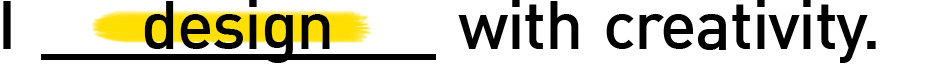
<style>
.page{position:relative;width:936px;height:64px;background:#ffffff}
.page>*{position:absolute;margin:0}
.t1{font:68.4px "DIN-Medium";color:#000000}
.t2{font:68.4px "DIN-Medium";letter-spacing:-0.025em;color:#000000}
</style>
<div class="page">
<p class="t1" style="left:3px;top:1px;width:8px;height:48px">I</p>
<p class="t2" style="left:144px;top:0px;width:186px;height:63px">design</p>
<p class="t2" style="left:458px;top:0px;width:121px;height:49px">with</p>
<p class="t2" style="left:606px;top:0px;width:270px;height:63px">creativity.</p>
</div>
